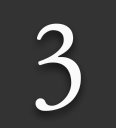
<style>
.page{position:relative;width:116px;height:128px;background:#333333}
.page>*{position:absolute;margin:0}
.t1{font:102px "KoPubWorldBatangMedium";color:#fafafa}
</style>
<div class="page">
<p class="t1" style="left:35px;top:23px;width:46px;height:88px">3</p>
</div>
